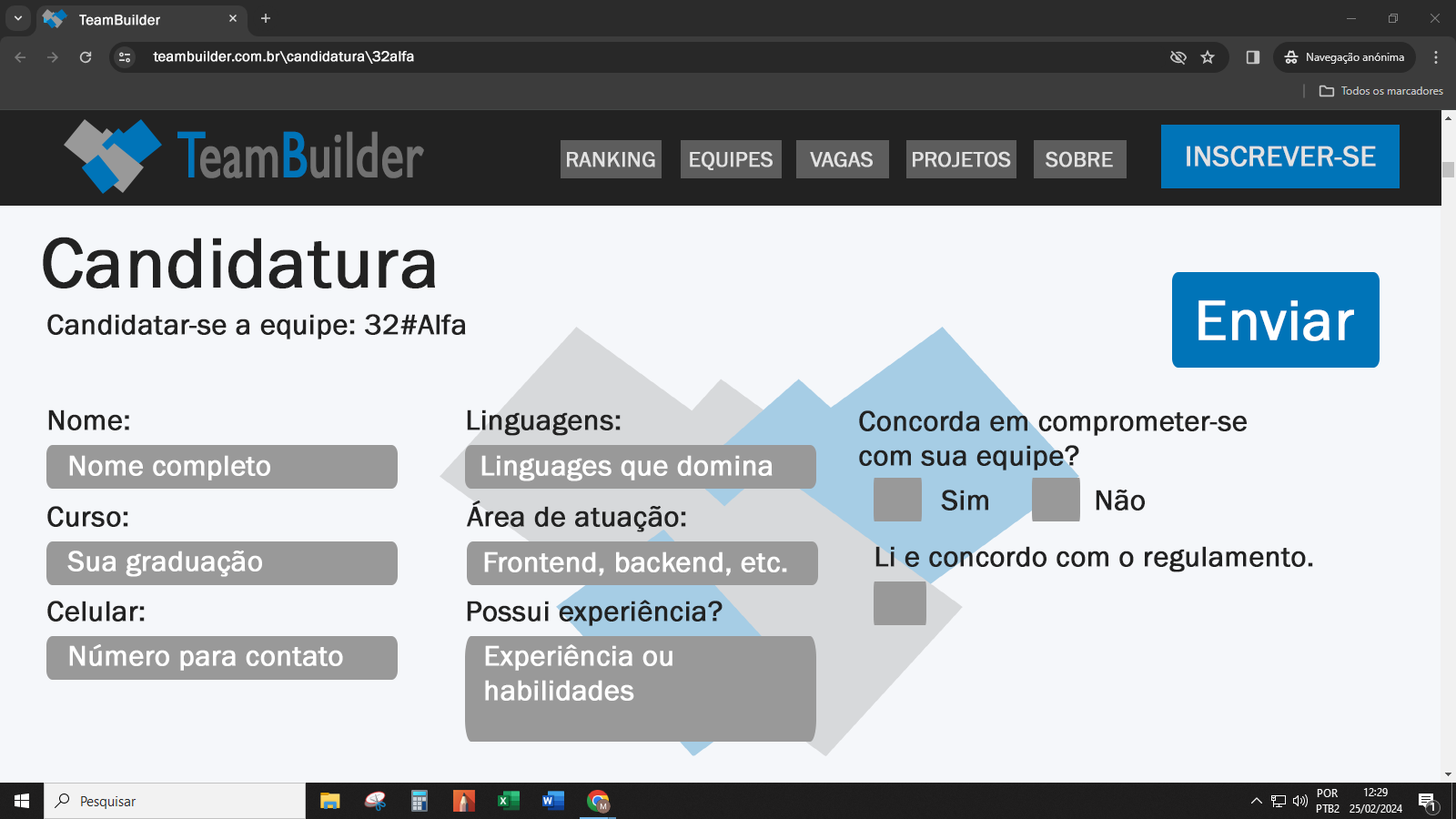
<style>
.page{position:relative;width:1456px;height:819px;background:#f5f7fa}
.page>*{position:absolute;margin:0}
.t1{font:10.9px "FranklinGothic-Book";color:#ffffff;font-weight:bold}
.t2{font:14.6px "FranklinGothic-Book";color:#ffffff;font-weight:bold}
.t3{font:65.8px "GillSansMT";color:#717171;font-weight:bold;scale:0.71 1}
.t4{font:65.8px "GillSansMT";color:#0074b8;font-weight:bold;scale:0.71 1}
.t5{font:29.1px "FranklinGothic-Book";color:#e2e2e2;font-weight:bold}
.t6{font:21.8px "FranklinGothic-Book";color:#e2e2e2;font-weight:bold}
.t7{font:72.8px "FranklinGothic-Book";color:#222222;font-weight:bold}
.t8{font:58.2px "FranklinGothic-Book";color:#ffffff;font-weight:bold}
.t9{font:29.1px "FranklinGothic-Book";color:#222222;font-weight:bold}
.t10{font:29.1px "FranklinGothic-Book";color:#ffffff;font-weight:bold}
</style>
<div class="page">
<p class="t1" style="left:79px;top:15px;width:81px;height:10px">TeamBuilder</p>
<p class="t2" style="left:153px;top:51px;width:261px;height:13px">teambuilder.com.br\candidatura\32alfa</p>
<p class="t3" style="left:177px;top:131px;width:247px;height:47px"><span class="t4">T</span>eam<span class="t4">B</span>uilder</p>
<p class="t5" style="left:1187px;top:146px;width:189px;height:21px">INSCREVER-SE</p>
<p class="t6" style="left:567px;top:151px;width:88px;height:16px">RANKING</p>
<p class="t6" style="left:690px;top:151px;width:83px;height:19px">EQUIPES</p>
<p class="t6" style="left:810px;top:151px;width:63px;height:16px">VAGAS</p>
<p class="t6" style="left:913px;top:151px;width:98px;height:16px">PROJETOS</p>
<p class="t6" style="left:1046px;top:151px;width:67px;height:16px">SOBRE</p>
<p class="t7" style="left:43px;top:237px;width:392px;height:51px">Candidatura</p>
<p class="t8" style="left:1198px;top:300px;width:156px;height:41px">Enviar</p>
<p class="t9" style="left:47px;top:314px;width:419px;height:25px">Candidatar-se a equipe: 32#Alfa</p>
<p class="t9" style="left:48px;top:409px;width:81px;height:21px">Nome:</p>
<p class="t9" style="left:467px;top:409px;width:154px;height:27px">Linguagens:</p>
<p class="t9" style="left:859px;top:410px;width:388px;height:60px">Concorda em comprometer-se<br>com sua equipe?</p>
<p class="t10" style="left:69px;top:455px;width:201px;height:25px">Nome completo</p>
<p class="t10" style="left:481px;top:455px;width:292px;height:26px">Linguages que domina</p>
<p class="t9" style="left:941px;top:490px;width:47px;height:21px">Sim</p>
<p class="t9" style="left:1096px;top:490px;width:49px;height:21px">Não</p>
<p class="t9" style="left:47px;top:506px;width:81px;height:21px">Curso:</p>
<p class="t9" style="left:467px;top:500px;width:219px;height:32px">Área de atuação:</p>
<p class="t9" style="left:875px;top:546px;width:438px;height:26px">Li e concordo com o regulamento.</p>
<p class="t10" style="left:67px;top:551px;width:195px;height:26px">Sua graduação</p>
<p class="t10" style="left:484px;top:551px;width:303px;height:25px">Frontend, backend, etc.</p>
<p class="t9" style="left:47px;top:601px;width:98px;height:21px">Celular:</p>
<p class="t9" style="left:467px;top:600px;width:256px;height:26px">Possui experiência?</p>
<p class="t10" style="left:69px;top:644px;width:274px;height:27px">Número para contato</p>
<p class="t10" style="left:485px;top:644px;width:187px;height:57px">Experiência ou habilidades</p>
</div>
